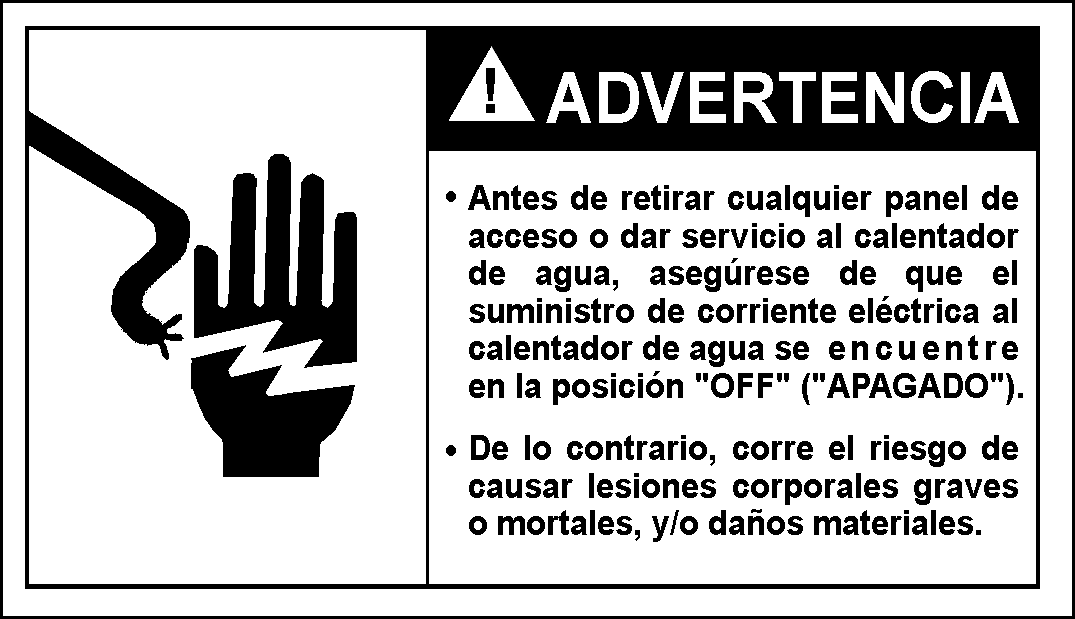
<style>
.page{position:relative;width:1075px;height:619px;background:#ffffff}
.page>*{position:absolute;margin:0}
.t1{font:70.8px "Arial-BoldMT";color:#ffffff;scale:0.93 1}
.t2{font:35.4px/37.5px "Arial-BoldMT";color:#000000;scale:0.94 1}
.t3{font:45.8px "ArialMT";color:#000000;scale:0.9 1}
</style>
<div class="page">
<p class="t1" style="left:546px;top:71px;width:473px;height:52px">ADVERTENCIA</p>
<p class="t2" style="left:468px;top:185px;width:555px;height:357px;text-align:justify">Antes de retirar cualquier panel de acceso o dar servicio al calentador de agua, asegúrese de que el suministro de corriente eléctrica al calentador de agua se  encuentre en la posición "OFF" ("APAGADO"). <br>De lo contrario, corre el riesgo de causar lesiones corporales graves o mortales, y/o daños materiales.</p>
<p class="t3" style="left:446px;top:191px;width:10px;height:11px">•</p>
<p class="t3" style="left:446px;top:445px;width:10px;height:11px">•</p>
</div>
